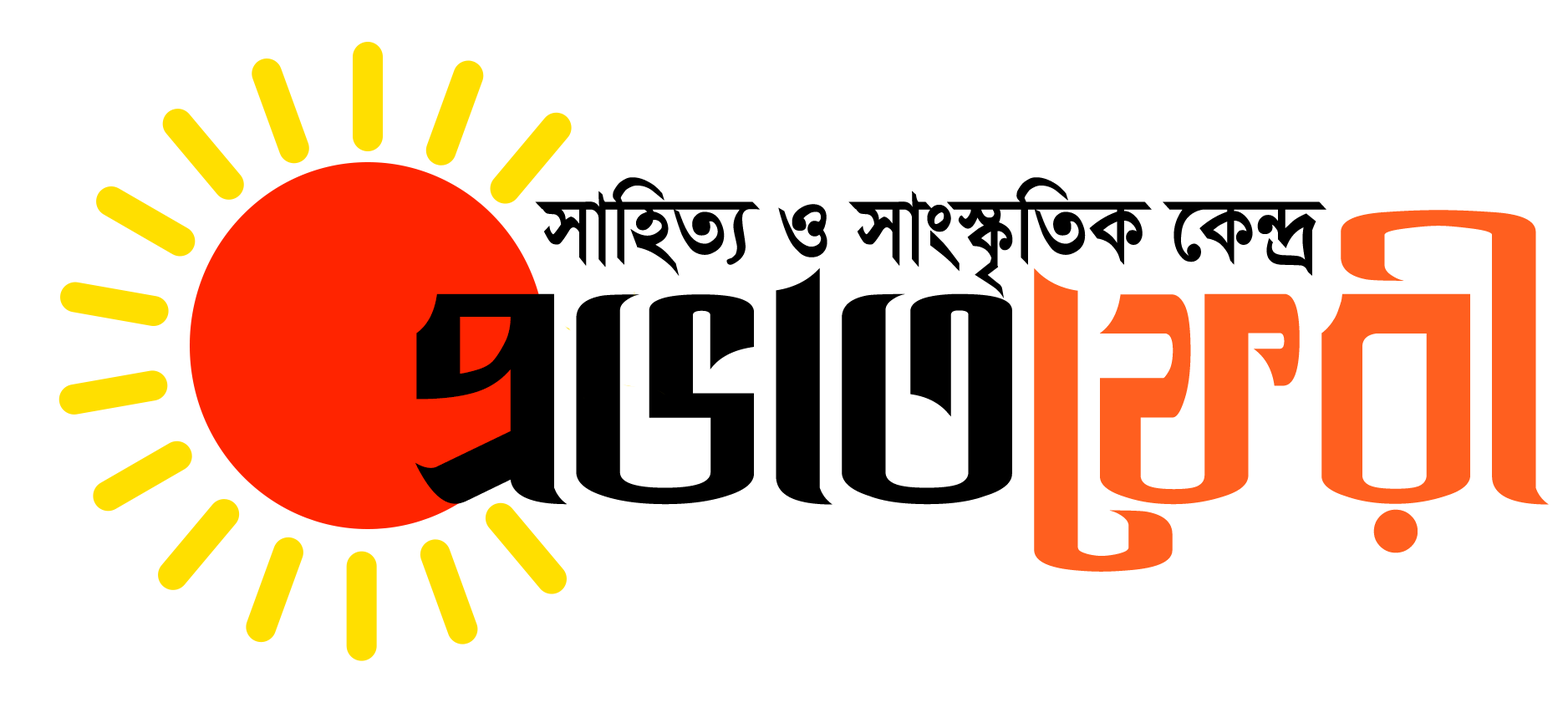
<style>
.page{position:relative;width:1568px;height:718px;background:#ffffff}
.page>*{position:absolute;margin:0}
.t1{font:106.2px "SutonnyMJ-Bold";color:#000000;scale:0.92 1}
.t2{font:337.4px "LiDurnibarANSIV1";color:#000000}
.t3{font:337.4px "LiDurnibarANSIV1";color:#ff5f1f}
</style>
<div class="page">
<p class="t1" style="left:535px;top:177px;width:791px;height:121px">mvwnZ¨ I mvs¯‹…wZK ‡K›`ª</p>
<p class="t2" style="left:415px;top:210px;width:1134px;height:362px">cÖfvZ<span class="t3">‡dix</span></p>
</div>
